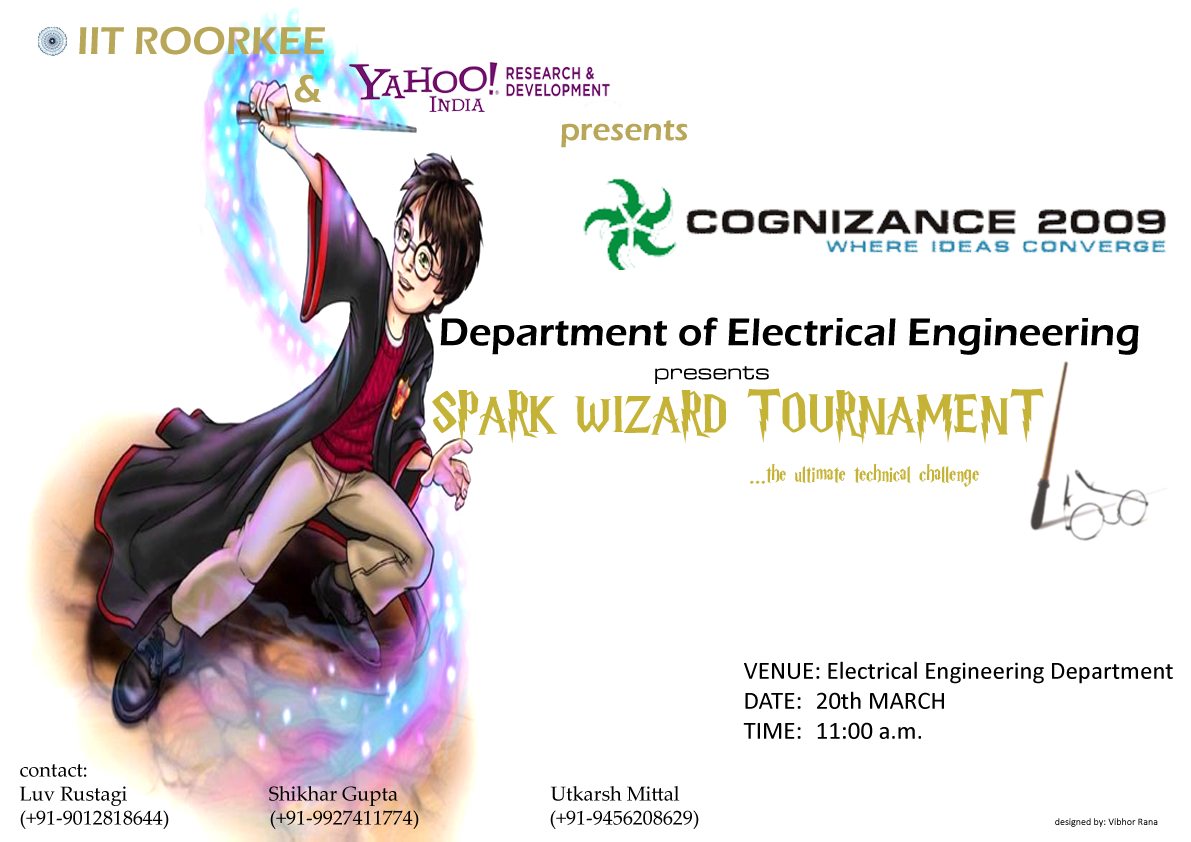
<style>
.page{position:relative;width:1191px;height:842px;background:#ffffff}
.page>*{position:absolute;margin:0}
.t1{font:40px "ErasITC-Demi";color:#b8a759}
.t2{font:32px "ErasITC-Demi";color:#b8a759}
.t3{font:40px "ErasITC-Demi";color:#000000}
.t4{font:25px "MetrostyleExtended-Regular";color:#000000}
.t5{font:55px "HarryP";color:#c5b337}
.t6{font:25px "HarryP";color:#c5b337}
.t7{font:25px "Calibri";color:#000000}
.t8{font:20px "PalatinoLinotype-Roman";color:#000000}
.t9{font:10px "Calibri"}
</style>
<div class="page">
<p class="t1" style="left:79px;top:26px;width:246px;height:77px">IIT ROORKEE<br>      &amp;</p>
<p class="t2" style="left:561px;top:120px;width:127px;height:28px">presents</p>
<p class="t3" style="left:440px;top:317px;width:699px;height:38px">Department of Electrical Engineering</p>
<p class="t4" style="left:655px;top:366px;width:114px;height:18px">presents</p>
<p class="t5" style="left:432px;top:388px;width:612px;height:57px">SPARK WIZARD TOURNAMENT</p>
<p class="t6" style="left:750px;top:464px;width:229px;height:23px">...the ultimate technical challenge</p>
<p class="t7" style="left:743px;top:661px;width:430px;height:78px">VENUE: Electrical Engineering Department<br>DATE: 20th MARCH<br>TIME: 11:00 a.m.</p>
<p class="t8" style="left:19px;top:764px;width:680px;height:65px">contact:<br>Luv Rustagi                       Shikhar Gupta                            Utkarsh Mittal<br>(+91-9012818644)               (+91-9927411774)                          (+91-9456208629)</p>
<p class="t9" style="left:1055px;top:818px;width:103px;height:9px">designed by: Vibhor Rana</p>
</div>
